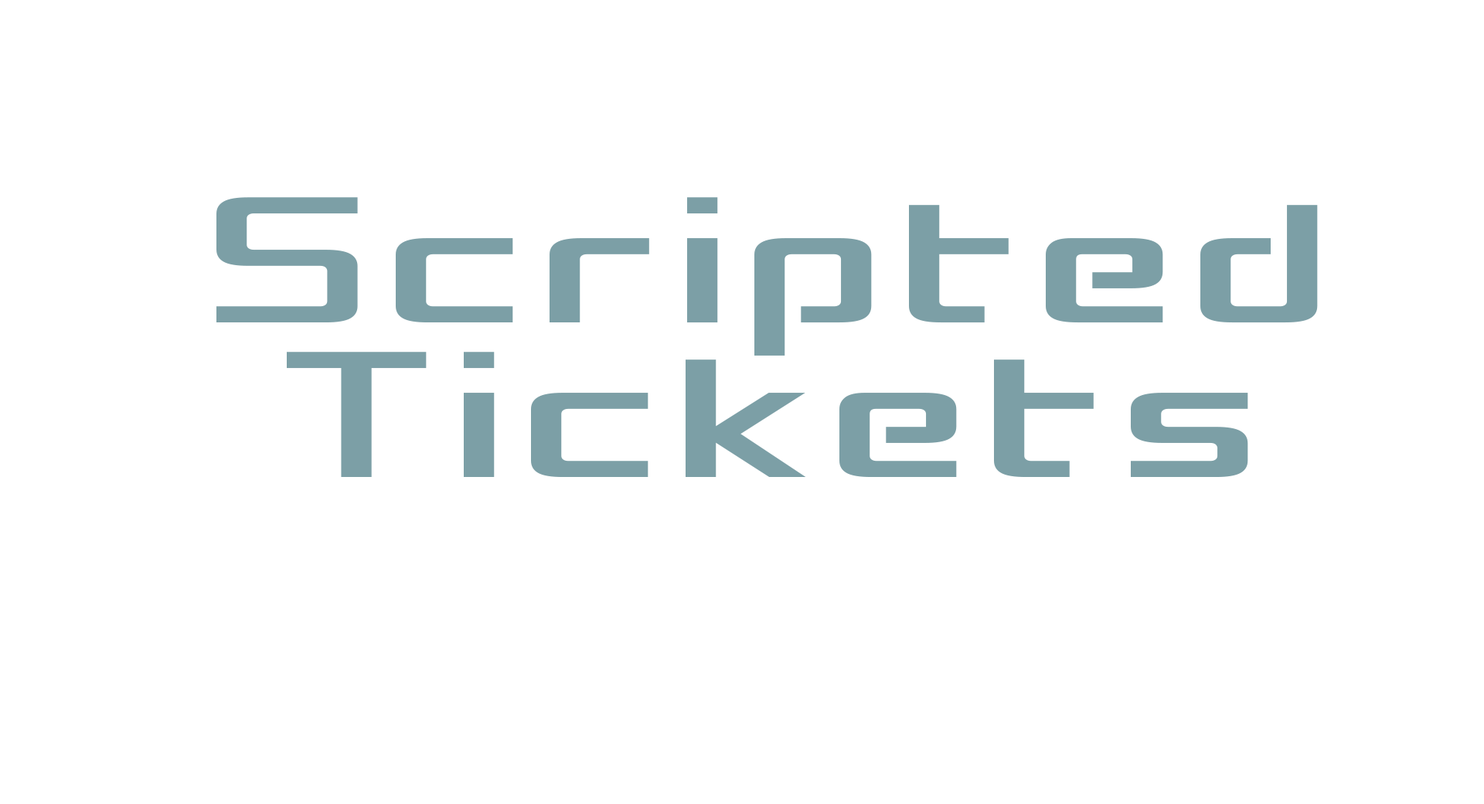
<style>
.page{position:relative;width:1484px;height:804px;background:#ffffff}
.page>*{position:absolute;margin:0}
.t1{font:231.8px "ConcielianBreak";letter-spacing:0.1em;color:#7c9fa6;scale:0.75 1}
</style>
<div class="page">
<p class="t1" style="left:216px;top:197px;width:1102px;height:280px">Scripted Tickets</p>
</div>
